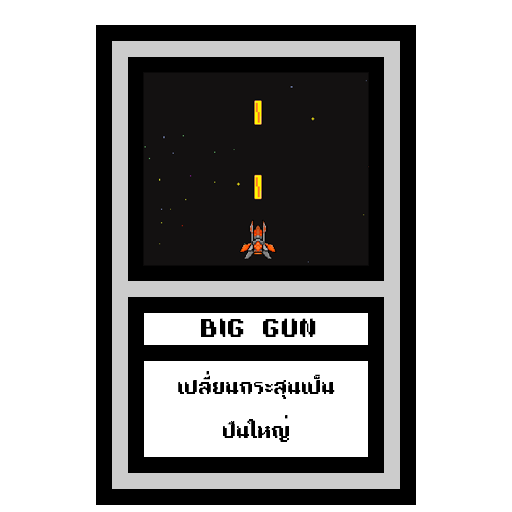
<style>
.page{position:relative;width:512px;height:512px;background:#ffffff}
.page>*{position:absolute;margin:0}
.t1{font:24px "TA16BIT-Regular";color:#000000}
.t2{font:18px "TA16BIT-Regular";color:#000000}
</style>
<div class="page">
<p class="t1" style="left:201px;top:318px;width:115px;height:19px">BIG GUN</p>
<p class="t2" style="left:178px;top:371px;width:157px;height:71px;text-align:center">เปลี่ยนกระสุนเป็น<br><br>ปืนใหญ่</p>
</div>
